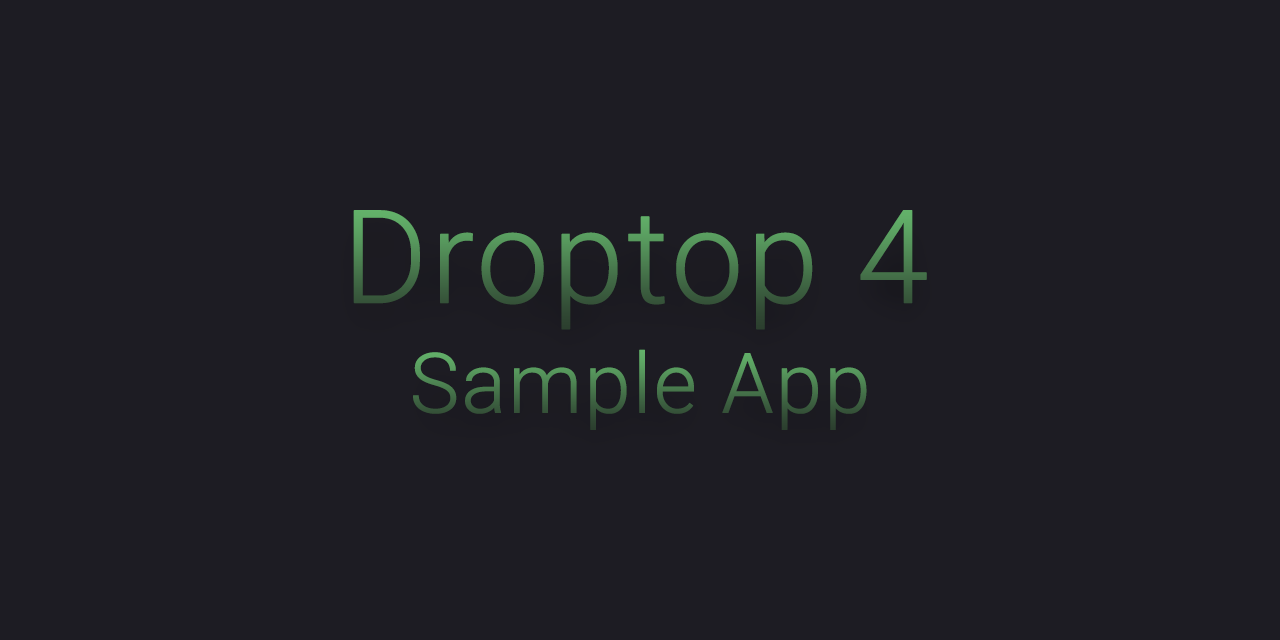
<style>
.page{position:relative;width:1280px;height:640px;background:#1d1c23}
.page>*{position:absolute;margin:0}
.t1{font:129.2px "Roboto-Light";font-weight:bold}
.t2{font:83.3px "Roboto-Light";font-weight:bold}
</style>
<div class="page">
<p class="t1" style="left:353px;top:210px;width:574px;height:120px">Droptop 4</p>
<p class="t2" style="left:413px;top:349px;width:454px;height:81px">Sample App</p>
</div>
